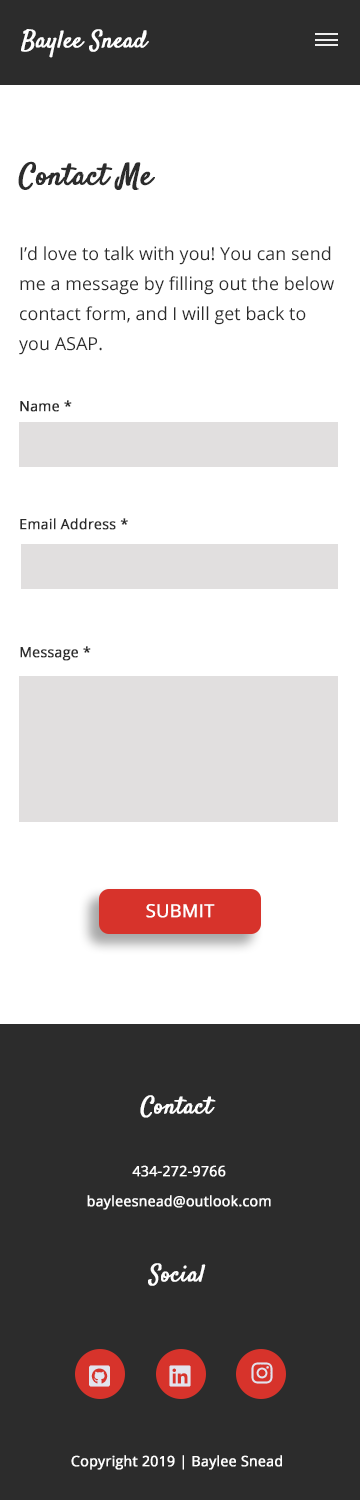
<style>
.page{position:relative;width:360px;height:1500px;background:#ffffff}
.page>*{position:absolute;margin:0}
.t1{font:24px "Satisfy-Regular";color:#ffffff;font-weight:bold}
.t2{font:30px "Satisfy-Regular";color:#2c2c2c;font-weight:bold}
.t3{font:18px/30px "OpenSans";color:#2c2c2c}
.t4{font:18px/48px "OpenSans";color:#2c2c2c}
.t5{font:14px "OpenSans";color:#2c2c2c;font-weight:bold}
.t6{font:18px "OpenSans";color:#ffffff;text-transform:uppercase;font-weight:bold}
.t7{font:14px/30px "OpenSans";color:#ffffff;font-weight:bold}
.t8{font:14px "OpenSans";color:#ffffff;font-weight:bold}
</style>
<div class="page">
<p class="t1" style="left:21px;top:29px;width:128px;height:29px">Baylee Snead</p>
<p class="t2" style="left:18px;top:161px;width:137px;height:29px">Contact Me</p>
<p class="t3" style="left:19px;top:246px;width:315px;height:109px"><span class="t4">I’d</span> love to talk with you! You can send me a message by filling out the below contact form, and I will get back to you ASAP.</p>
<p class="t5" style="left:20px;top:400px;width:52px;height:12px">Name *</p>
<p class="t5" style="left:20px;top:518px;width:108px;height:12px">Email Address *</p>
<p class="t5" style="left:20px;top:646px;width:71px;height:15px">Message *</p>
<p class="t6" style="left:146px;top:904px;width:69px;height:14px">Submit</p>
<p class="t1" style="left:140px;top:1095px;width:76px;height:23px">Contact</p>
<p class="t7" style="left:87px;top:1165px;width:184px;height:45px;text-align:center">434-272-9766<br>bayleesnead@outlook.com</p>
<p class="t1" style="left:148px;top:1263px;width:58px;height:23px">Social</p>
<p class="t8" style="left:71px;top:1455px;width:211px;height:15px">Copyright 2019 | Baylee Snead</p>
</div>
